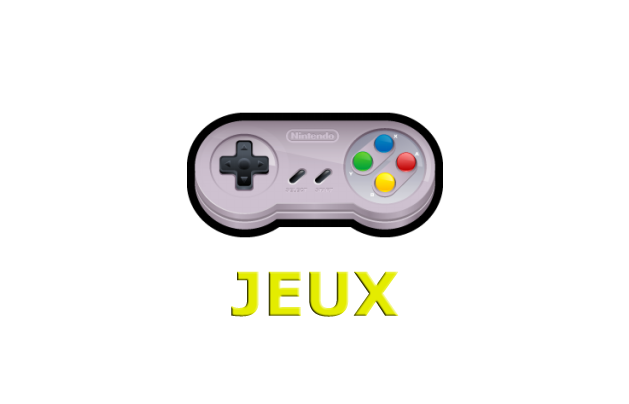
<style>
.page{position:relative;width:629px;height:404px;background:#ffffff}
.page>*{position:absolute;margin:0}
.t1{font:60px "Verdana-Bold";color:#e4ec00}
</style>
<div class="page">
<p class="t1" style="left:231px;top:271px;width:168px;height:46px">JEUX</p>
</div>
